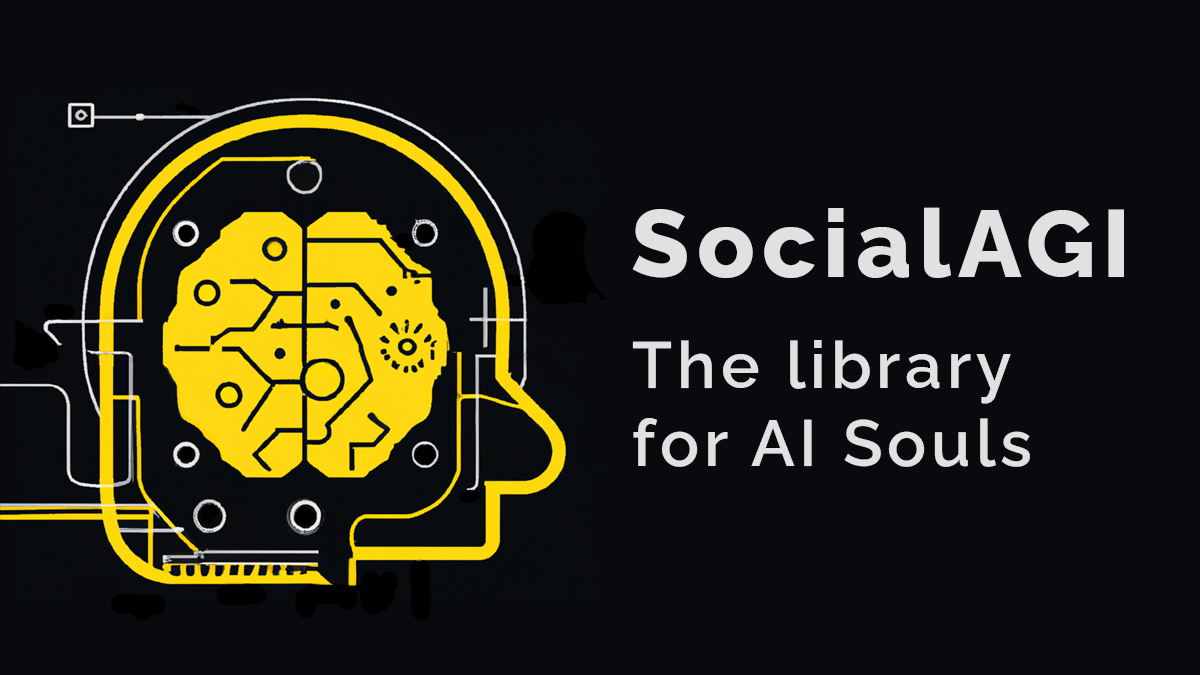
<style>
.page{position:relative;width:1200px;height:675px;background:#080a0d}
.page>*{position:absolute;margin:0}
.t1{font:95px "RalewayRoman-ExtraBold";letter-spacing:0.075em;color:#e1e1e2}
.t2{font:65px "RalewayRoman-SemiBold";letter-spacing:0.075em;color:#e1e1e2}
</style>
<div class="page">
<p class="t1" style="left:632px;top:207px;width:492px;height:71px">SocialAGI</p>
<p class="t2" style="left:632px;top:340px;width:398px;height:127px">The library<br>for AI Souls</p>
</div>
